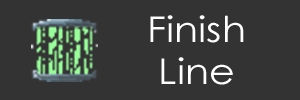
<style>
.page{position:relative;width:300px;height:100px;background:#333333}
.page>*{position:absolute;margin:0}
.t1{font:35.5px "CenturyGothic";color:#ffffff;scale:1.12 1}
</style>
<div class="page">
<p class="t1" style="left:150px;top:15px;width:94px;height:70px;text-align:center">Finish<br>Line</p>
</div>
